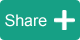
<style>
.page{position:relative;width:80px;height:40px;background:#16a085}
.page>*{position:absolute;margin:0}
.t1{font:16px "ArialMT";color:#ffffff}
</style>
<div class="page">
<p class="t1" style="left:5px;top:14px;width:42px;height:13px">Share</p>
</div>
